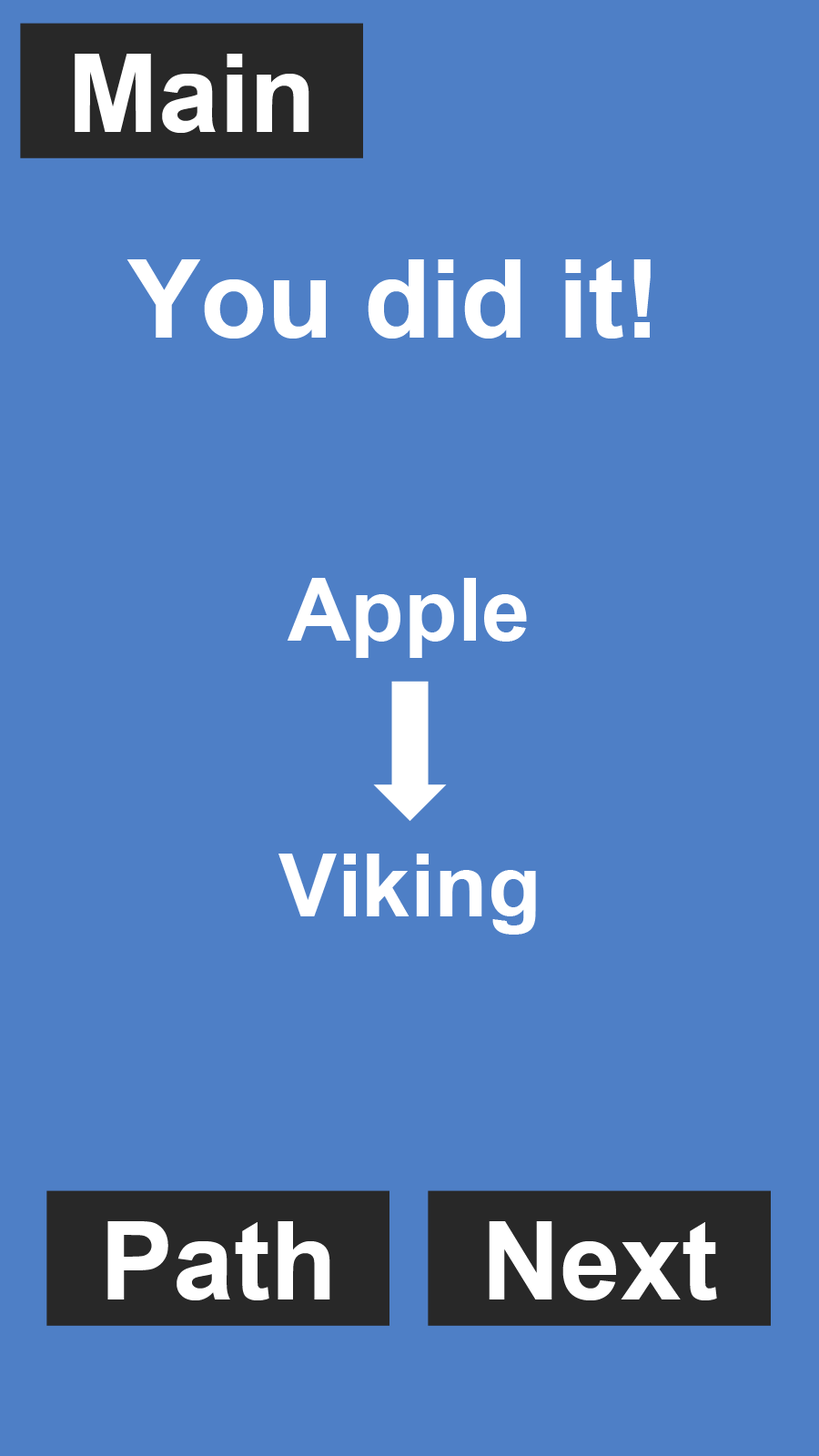
<style>
.page{position:relative;width:819px;height:1456px;background:#4e7fc6}
.page>*{position:absolute;margin:0}
.t1{font:109.2px "Arial-BoldMT";color:#ffffff}
.t2{font:87.4px "Arial-BoldMT";color:#ffffff}
</style>
<div class="page">
<p class="t1" style="left:75px;top:54px;width:234px;height:79px">Main</p>
<p class="t1" style="left:126px;top:259px;width:525px;height:80px">You did it!</p>
<p class="t2" style="left:287px;top:578px;width:240px;height:80px">Apple</p>
<p class="t2" style="left:278px;top:854px;width:258px;height:81px">Viking</p>
<p class="t1" style="left:107px;top:1221px;width:223px;height:79px">Path</p>
<p class="t1" style="left:489px;top:1221px;width:228px;height:79px">Next</p>
</div>
